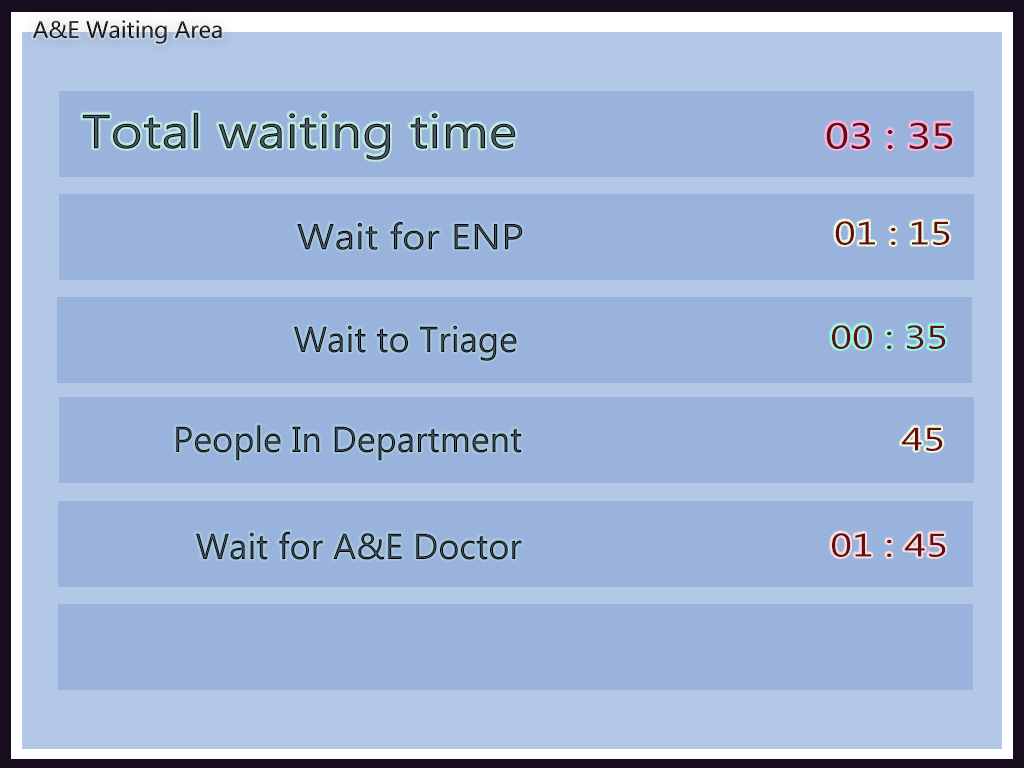
<style>
.page{position:relative;width:1024px;height:768px;background:#99b3dd}
.page>*{position:absolute;margin:0}
.t1{font:48px "MicrosoftNewTaiLue";scale:1.15 1}
.t2{font:36px "MicrosoftNewTaiLue";color:#670a12;scale:1.24 1}
.t3{font:36px "MicrosoftNewTaiLue";scale:1.12 1}
.t4{font:32.6px "MicrosoftNewTaiLue";color:#670a12;scale:1.24 1}
.t5{font:36px "MicrosoftNewTaiLue"}
</style>
<div class="page">
<p class="t1" style="left:82px;top:112px;width:434px;height:48px">Total waiting time</p>
<p class="t2" style="left:826px;top:122px;width:127px;height:27px">03 : 35</p>
<p class="t3" style="left:297px;top:222px;width:226px;height:28px">Wait for ENP</p>
<p class="t4" style="left:835px;top:221px;width:115px;height:24px">01 : 15</p>
<p class="t5" style="left:294px;top:325px;width:223px;height:36px">Wait to Triage</p>
<p class="t4" style="left:832px;top:325px;width:114px;height:24px">00 : 35</p>
<p class="t5" style="left:176px;top:425px;width:346px;height:36px">People In Department</p>
<p class="t4" style="left:901px;top:427px;width:42px;height:24px">45</p>
<p class="t5" style="left:196px;top:531px;width:326px;height:29px">Wait for A&amp;E Doctor</p>
<p class="t4" style="left:832px;top:533px;width:114px;height:24px">01 : 45</p>
</div>
